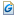
<style>
.page{position:relative;width:16px;height:16px;background:#ffffff}
.page>*{position:absolute;margin:0}
.t1{font:11.3px "TektonPro-BoldExt";font-weight:bold;font-style:italic;scale:0.75 1}
</style>
<div class="page">
<p class="t1" style="left:4px;top:4px;width:9px;height:9px">G</p>
</div>
